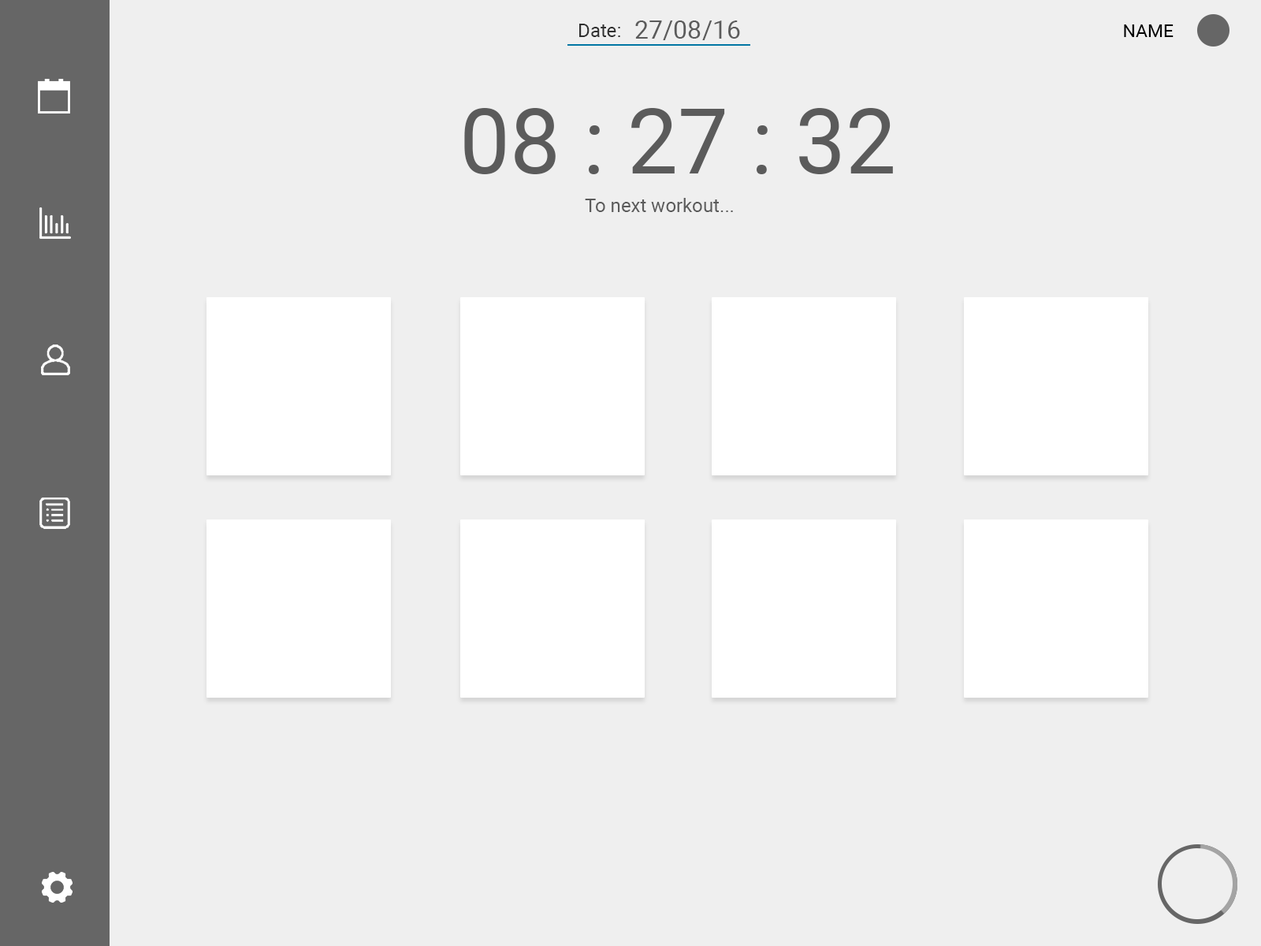
<style>
.page{position:relative;width:1261px;height:946px;background:#efefef}
.page>*{position:absolute;margin:0}
.t1{font:18.9px "Roboto-Regular";color:#303030}
.t2{font:25.2px "Roboto-Regular";color:#5b5b5b}
.t3{font:18.1px "Roboto-Regular";color:#000000;text-transform:uppercase}
.t4{font:90.2px "Roboto-Regular";color:#5b5b5b}
.t5{font:18.9px "Roboto-Regular";color:#5b5b5b}
</style>
<div class="page">
<p class="t1" style="left:579px;top:24px;width:41px;height:13px">Date:</p>
<p class="t2" style="left:635px;top:20px;width:105px;height:20px">27/08/16</p>
<p class="t3" style="left:1124px;top:24px;width:49px;height:13px">Name</p>
<p class="t4" style="left:464px;top:108px;width:429px;height:66px">08 : 27 : 32</p>
<p class="t5" style="left:585px;top:198px;width:148px;height:14px">To next workout...</p>
</div>
